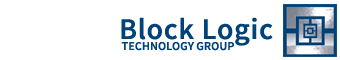
<style>
.page{position:relative;width:340px;height:60px;background:#ffffff}
.page>*{position:absolute;margin:0}
.t1{font:30px "SourceSansRoman-Semibold";letter-spacing:0.025em;color:#00427a}
.t2{font:12px "SourceSansRoman-Semibold";letter-spacing:0.01em;color:#00427a}
</style>
<div class="page">
<p class="t1" style="left:121px;top:17px;width:152px;height:29px">Block Logic</p>
<p class="t2" style="left:121px;top:42px;width:113px;height:9px">TECHNOLOGY GROUP</p>
</div>
